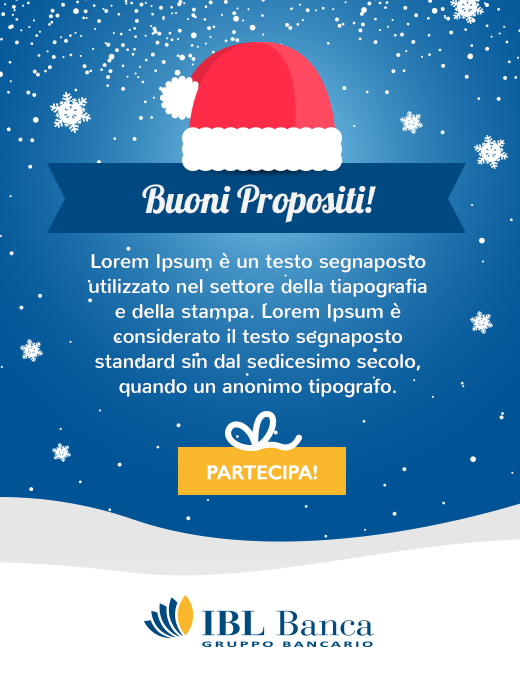
<style>
.page{position:relative;width:520px;height:682px;background:#ffffff}
.page>*{position:absolute;margin:0}
.t1{font:38px "Lobster";color:#f3f3f3}
.t2{font:20px/25px "Nunito-Regular";color:#ffffff}
.t3{font:20px "GillSans-SemiBold";color:#ffffff;text-transform:uppercase}
</style>
<div class="page">
<p class="t1" style="left:142px;top:184px;width:234px;height:39px">Buoni Propositi!</p>
<p class="t2" style="left:89px;top:252px;width:338px;height:146px;text-align:center">Lorem Ipsum è un testo segnaposto <br>utilizzato nel settore della tiapografia <br>e della stampa. Lorem Ipsum è <br>considerato il testo segnaposto <br>standard sin dal sedicesimo secolo, <br>quando un anonimo tipografo.</p>
<p class="t3" style="left:207px;top:465px;width:110px;height:15px">Partecipa!</p>
</div>
